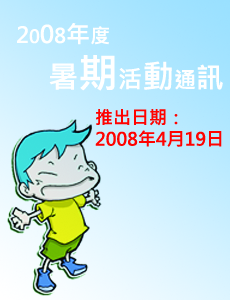
<style>
.page{position:relative;width:230px;height:300px}
.page>*{position:absolute;margin:0}
.t1{font:22px "MicrosoftJhengHeiBold";color:#ffffff}
.t2{font:18px "MicrosoftJhengHeiBold";color:#ffffff}
.t3{font:24px "MicrosoftJhengHeiBold";color:#ffffff}
.t4{font:20px "MicrosoftJhengHeiBold";color:#ffffff}
.t5{font:30px "MicrosoftJhengHeiBold";color:#ffffff}
.t6{font:40px "MicrosoftJhengHeiBold";color:#ffffff}
.t7{font:32px "MicrosoftJhengHeiBold";color:#ffffff}
.t8{font:28px "MicrosoftJhengHeiBold";color:#ffffff}
.t9{font:18px "MicrosoftJhengHeiBold";color:#ff0200}
</style>
<div class="page">
<p class="t1" style="left:17px;top:23px;width:92px;height:22px">2<span class="t2">0</span><span class="t3">0</span><span class="t4">8</span><span class="t3">年</span><span class="t4">度</span></p>
<p class="t5" style="left:49px;top:55px;width:174px;height:36px">暑<span class="t6">期</span><span class="t3">活</span><span class="t7">動</span><span class="t1">通</span><span class="t8">訊</span></p>
<p class="t9" style="left:95px;top:109px;width:127px;height:38px">推出日期：<br>2008年4月19日</p>
</div>
